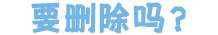
<style>
.page{position:relative;width:218px;height:35px;background:#ffffff}
.page>*{position:absolute;margin:0}
.t1{font:33.7px "shetumodengxiaofangti";color:#73b5e4;font-weight:bold}
</style>
<div class="page">
<p class="t1" style="left:31px;top:2px;width:155px;height:32px">要删除吗？</p>
</div>
